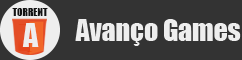
<style>
.page{position:relative;width:242px;height:60px;background:#333333}
.page>*{position:absolute;margin:0}
.t1{font:10px "Impact";color:#131313}
.t2{font:30px "Impact";color:#eeeeee}
.t3{font:27.8px "Impact";color:#eeeeee}
</style>
<div class="page">
<p class="t1" style="left:12px;top:8px;width:36px;height:8px">TORRENT</p>
<p class="t2" style="left:22px;top:23px;width:17px;height:24px">A</p>
<p class="t3" style="left:75px;top:19px;width:166px;height:27px">Avanço Games</p>
</div>
